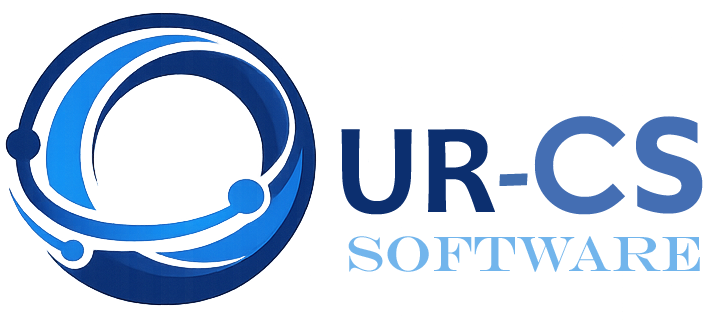
<style>
.page{position:relative;width:712px;height:320px;background:#ffffff}
.page>*{position:absolute;margin:0}
.t1{font:130px "Candara-Bold";color:#0c2f6f}
.t2{font:130px "Candara-Bold";color:#416dad}
.t3{font:130px "CenturyGothic-Bold";color:#446db3}
.t4{font:130px "AzoSans-Bold";color:#446db3}
.t5{font:50px "EngraversMT";color:#72b5ec}
</style>
<div class="page">
<p class="t1" style="left:341px;top:116px;width:362px;height:99px">UR<span class="t2">-</span><span class="t3">C</span><span class="t4">S</span></p>
<p class="t5" style="left:348px;top:236px;width:352px;height:36px">Software</p>
</div>
